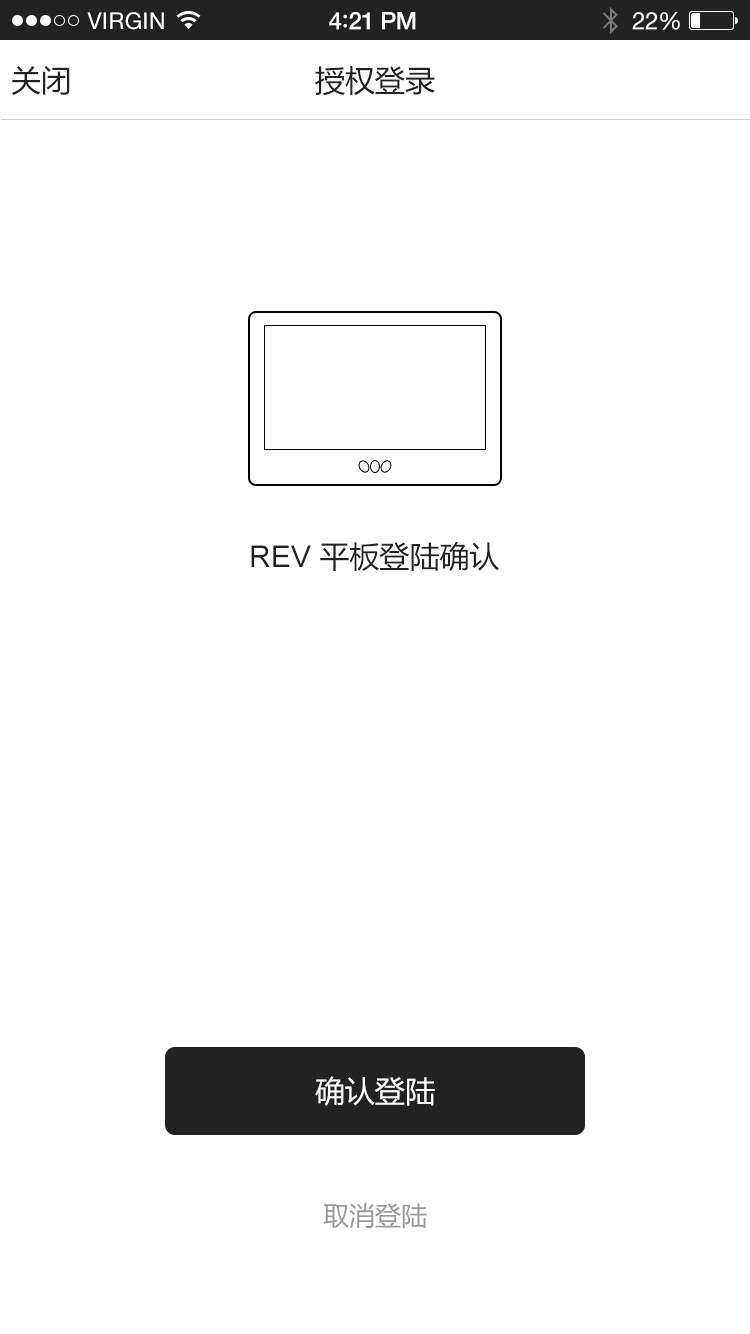
<style>
.page{position:relative;width:750px;height:1334px;background:#ffffff}
.page>*{position:absolute;margin:0}
.t1{font:23px "HelveticaNeue";letter-spacing:0.02em;color:#ffffff}
.t2{font:24px "HelveticaNeue-Medium";letter-spacing:-0.02em;color:#ffffff}
.t3{font:26px "Avenir-Medium";letter-spacing:-0.02em;color:#ffffff}
.t4{font:24px "HelveticaNeue";letter-spacing:-0.02em;color:#ffffff}
.t5{font:30px "MicrosoftYaHei";color:#222222}
.t6{font:30px "ArialMT";color:#222222}
.t7{font:30px "MicrosoftYaHei";color:#ffffff}
.t8{font:26px "MicrosoftYaHei";color:#999999}
</style>
<div class="page">
<p class="t1" style="left:87px;top:12px;width:77px;height:18px">VIRGIN</p>
<p class="t2" style="left:329px;top:12px;width:87px;height:18px">4<span class="t3">:</span>21 PM</p>
<p class="t4" style="left:632px;top:12px;width:48px;height:18px">22%</p>
<p class="t5" style="left:11px;top:66px;width:59px;height:29px">关闭</p>
<p class="t5" style="left:315px;top:66px;width:120px;height:30px">授权登录</p>
<p class="t5" style="left:251px;top:541px;width:248px;height:30px"><span class="t6">REV</span> 平板登陆确认</p>
<p class="t7" style="left:315px;top:1076px;width:120px;height:30px">确认登陆</p>
<p class="t8" style="left:323px;top:1203px;width:104px;height:26px">取消登陆</p>
</div>
